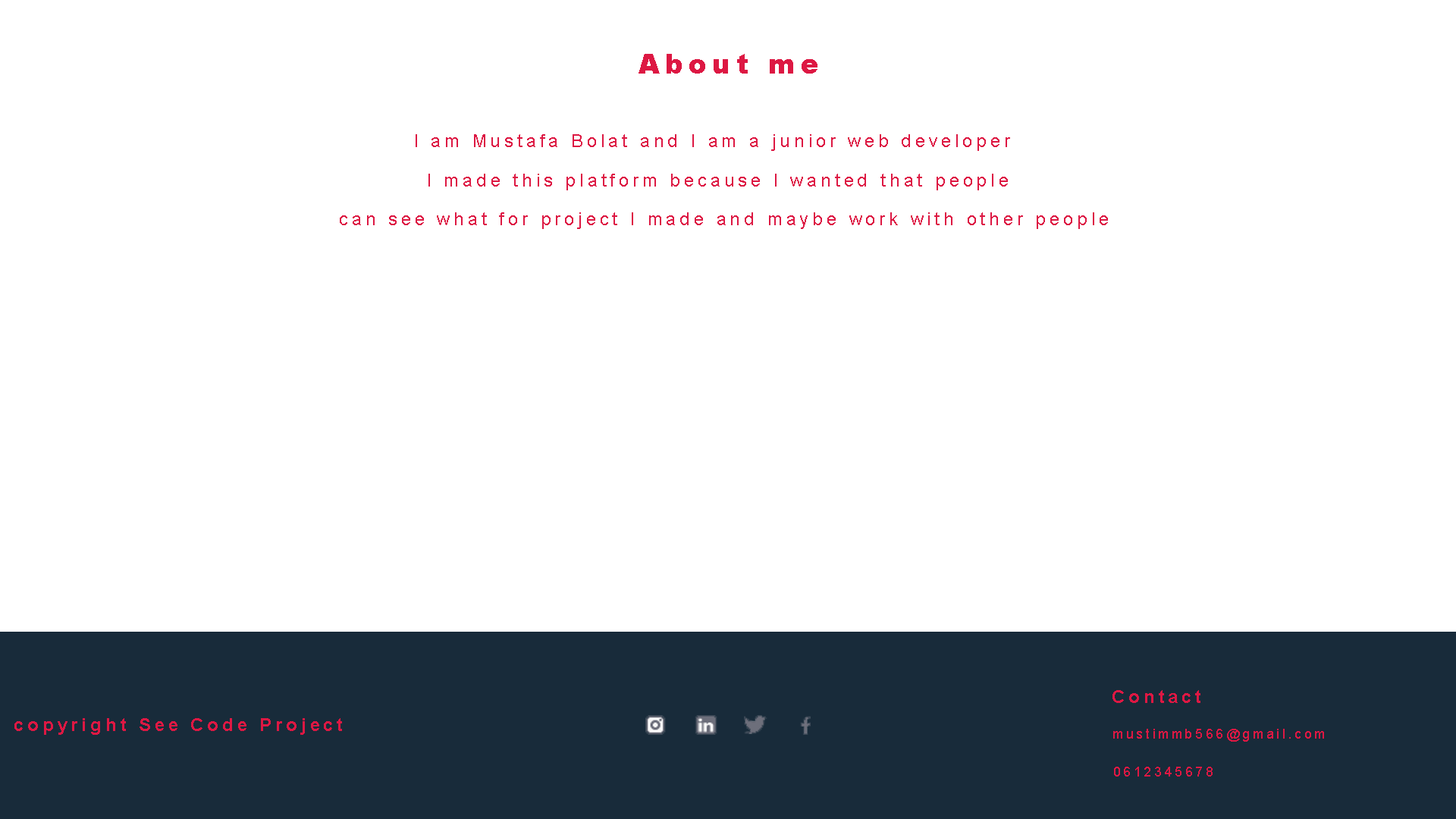
<style>
.page{position:relative;width:1456px;height:819px;background:#ffffff}
.page>*{position:absolute;margin:0}
.t1{font:27.3px "Arial-Black";letter-spacing:0.2em;color:#dd1843}
.t2{font:18.2px "ArialMT";letter-spacing:0.2em;color:#dd1843}
.t3{font:18.2px "Arial-BoldMT";letter-spacing:0.2em;color:#dd1843}
.t4{font:13.6px "ArialMT";letter-spacing:0.2em;color:#dd1843}
</style>
<div class="page">
<p class="t1" style="left:639px;top:54px;width:178px;height:20px">About me</p>
<p class="t2" style="left:416px;top:134px;width:594px;height:17px">I am Mustafa Bolat and I am a junior web developer</p>
<p class="t2" style="left:428px;top:174px;width:580px;height:16px">I made this platform because I wanted that people</p>
<p class="t2" style="left:340px;top:212px;width:768px;height:17px">can see what for project I made and maybe work with other people</p>
<p class="t3" style="left:1112px;top:690px;width:88px;height:13px">Contact</p>
<p class="t3" style="left:14px;top:718px;width:328px;height:17px">copyright See Code Project</p>
<p class="t4" style="left:1113px;top:729px;width:211px;height:13px">mustimmb566@gmail.com</p>
<p class="t4" style="left:1114px;top:767px;width:99px;height:10px">0612345678</p>
</div>
